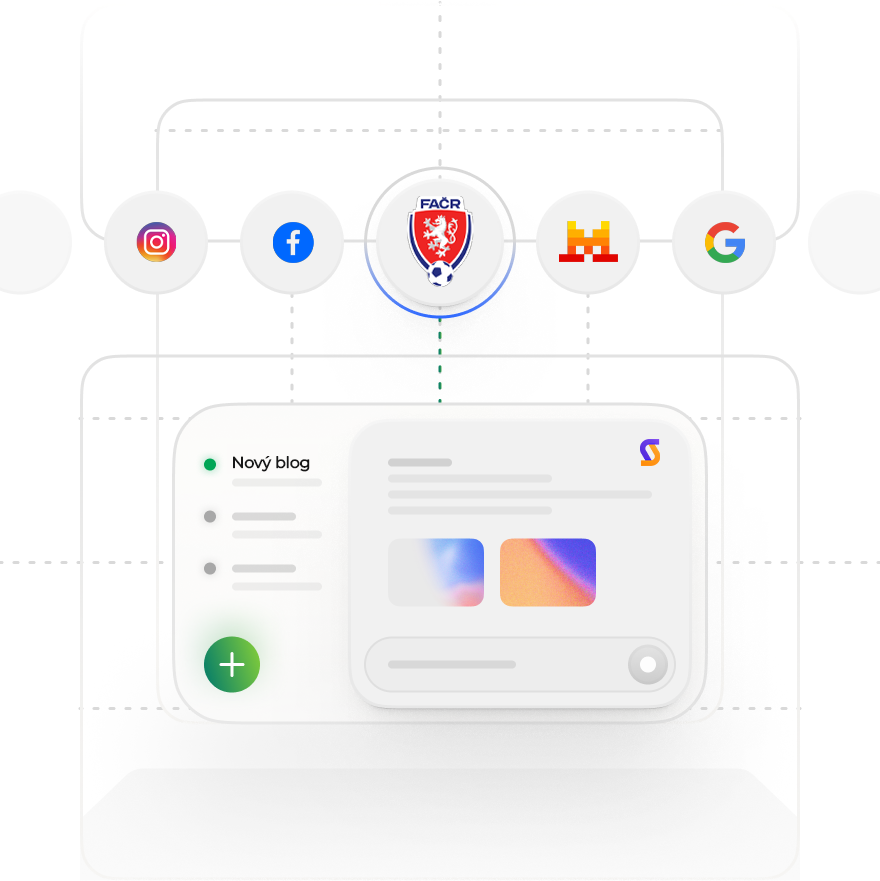
<style>
.page{position:relative;width:880px;height:881px;background:#ffffff}
.page>*{position:absolute;margin:0}
.t1{font:16px "Montserrat-Medium";letter-spacing:-0.02em;color:#181818}
</style>
<div class="page">
<p class="t1" style="left:233px;top:456px;width:77px;height:16px">Nový blog</p>
</div>
